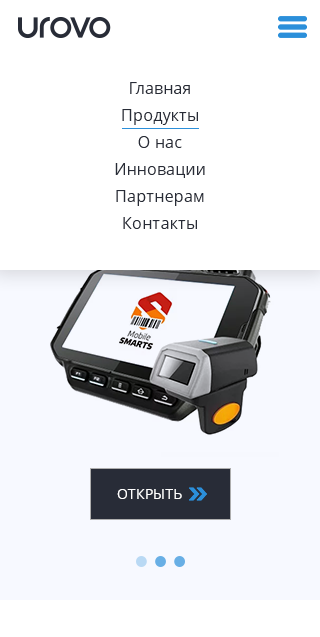
<style>
.page{position:relative;width:320px;height:637px;background:#ffffff}
.page>*{position:absolute;margin:0}
.t1{font:16px/27px "OpenSans";letter-spacing:0.01em;color:#282c37}
.t2{font:14px "OpenSans";letter-spacing:0.01em;color:#ffffff;text-transform:uppercase}
</style>
<div class="page">
<p class="t1" style="left:115px;top:82px;width:90px;height:147px;text-align:center">Главная<br>Продукты<br>О нас<br>Инновации<br>Партнерам<br>Контакты</p>
<p class="t2" style="left:117px;top:489px;width:65px;height:10px">Открыть</p>
</div>
